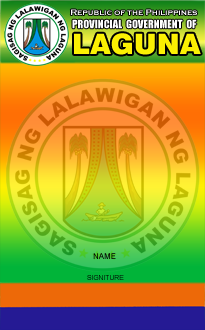
<style>
.page{position:relative;width:205px;height:330px}
.page>*{position:absolute;margin:0}
.t1{font:8.3px "CopperplateGothic-Bold";color:#ffffff}
.t2{font:10.8px "Impact";color:#ffffff}
.t3{font:28.2px "Swiss721BT-Black";color:#f9ee00}
.t4{font:8.1px "ArialMT"}
.t5{font:6.7px "ArialMT";color:#000000}
</style>
<div class="page">
<p class="t1" style="left:70px;top:9px;width:127px;height:7px">Republic of the Philippines</p>
<p class="t2" style="left:72px;top:19px;width:125px;height:10px">PROVINCIAL  GOVERNMENT  OF</p>
<p class="t3" style="left:74px;top:33px;width:127px;height:22px">LAGUNA</p>
<p class="t4" style="left:93px;top:253px;width:23px;height:6px">NAME</p>
<p class="t5" style="left:87px;top:275px;width:37px;height:5px">SIGNITURE</p>
</div>
